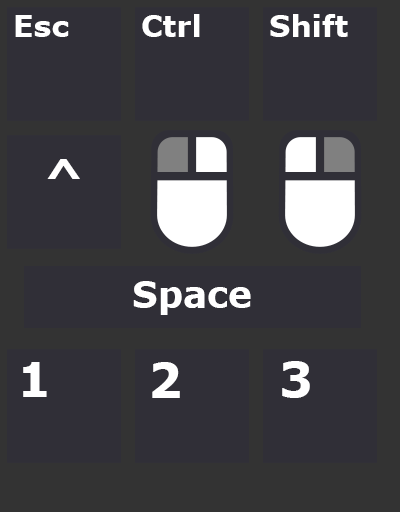
<style>
.page{position:relative;width:400px;height:512px;background:#302f37}
.page>*{position:absolute;margin:0}
.t1{font:30px "Verdana-Bold";color:#ffffff}
.t2{font:48px "Verdana-Bold";color:#ffffff}
.t3{font:36px "Verdana-Bold";color:#ffffff}
</style>
<div class="page">
<p class="t1" style="left:15px;top:15px;width:54px;height:22px">Esc</p>
<p class="t1" style="left:142px;top:14px;width:58px;height:23px">Ctrl</p>
<p class="t1" style="left:270px;top:14px;width:78px;height:23px">Shift</p>
<p class="t2" style="left:47px;top:159px;width:33px;height:20px">^</p>
<p class="t3" style="left:133px;top:281px;width:118px;height:34px">Space</p>
<p class="t2" style="left:23px;top:362px;width:24px;height:35px">1</p>
<p class="t2" style="left:152px;top:362px;width:28px;height:36px">2</p>
<p class="t2" style="left:282px;top:361px;width:28px;height:37px">3</p>
</div>
